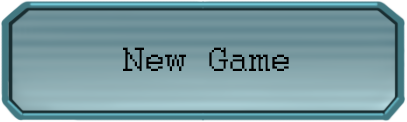
<style>
.page{position:relative;width:407px;height:122px}
.page>*{position:absolute;margin:0}
.t1{font:37.5px "Courier";color:#000000}
</style>
<div class="page">
<p class="t1" style="left:123px;top:47px;width:166px;height:24px">New Game</p>
</div>
